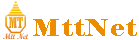
<style>
.page{position:relative;width:139px;height:40px;background:#ffffff}
.page>*{position:absolute;margin:0}
.t1{font:23.9px "Elephant-Regular";letter-spacing:0.075em;color:#ec8d01;scale:1.05 1}
</style>
<div class="page">
<p class="t1" style="left:33px;top:19px;width:104px;height:17px">MttNet</p>
</div>
